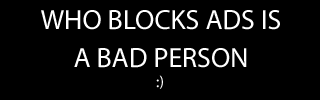
<style>
.page{position:relative;width:320px;height:100px;background:#000000}
.page>*{position:absolute;margin:0}
.t1{font:28px/37.8px "MyriadPro-Regular";color:#ffffff}
.t2{font:16px "MyriadPro-Regular";color:#ffffff}
</style>
<div class="page">
<p class="t1" style="left:41px;top:10px;width:239px;height:58px;text-align:center">WHO BLOCKS ADS IS<br>A BAD PERSON</p>
<p class="t2" style="left:156px;top:75px;width:7px;height:14px">:)</p>
</div>
